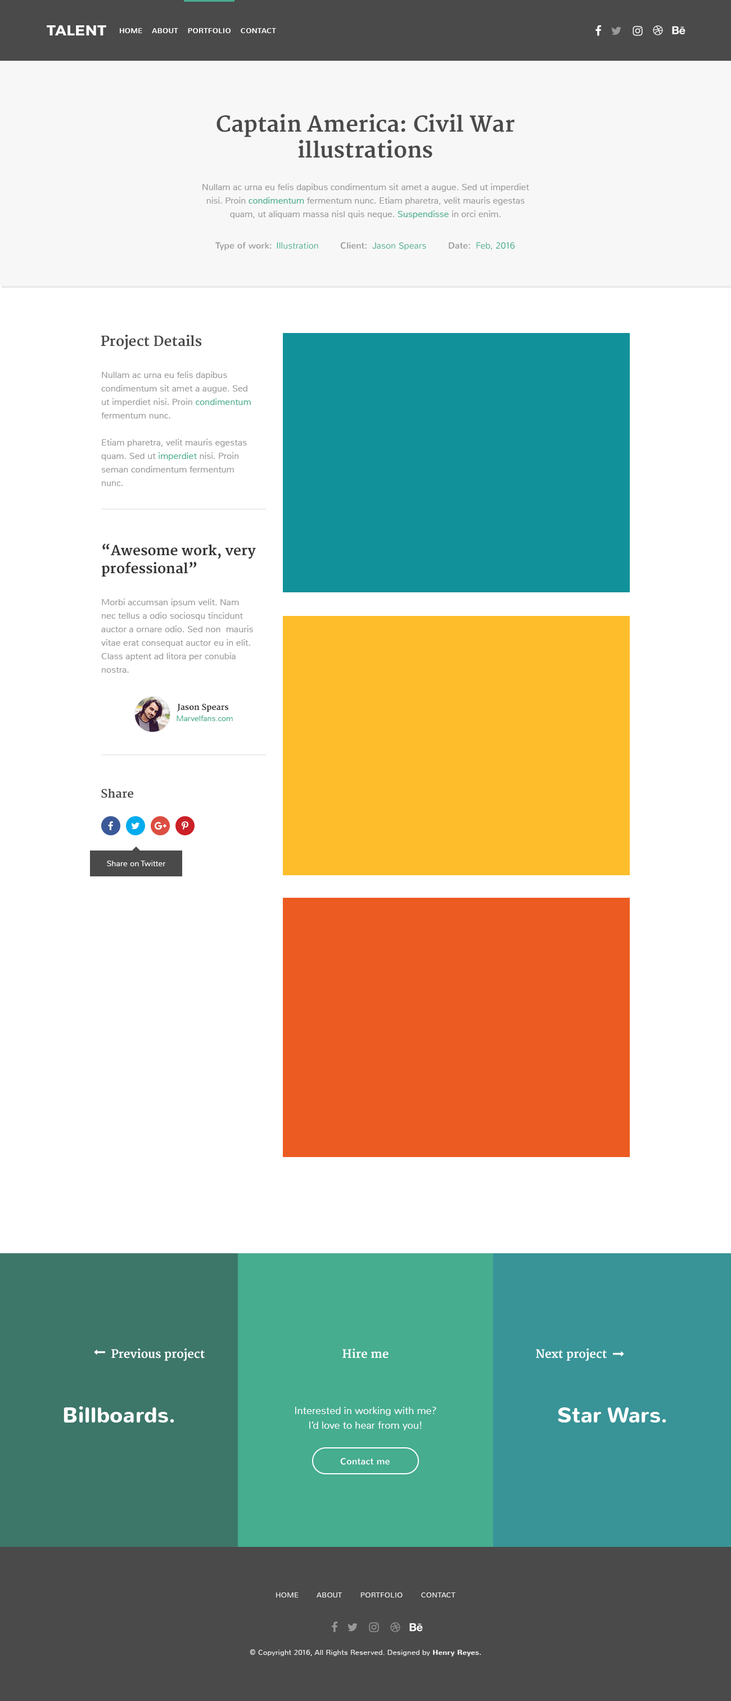
<style>
.page{position:relative;width:731px;height:1701px;background:#ffffff}
.page>*{position:absolute;margin:0}
.t1{font:14.6px "Montserrat-Bold";letter-spacing:0.025em;color:#ffffff;text-transform:uppercase}
.t2{font:7.3px "Nunito-Regular";letter-spacing:0.025em;color:#ffffff;text-transform:uppercase}
.t3{font:21.4px/25.9px "Merriweather-Bold";color:#4a4a4a}
.t4{font:9px/13.5px "Nunito-Light";color:#999999}
.t5{font:9px/13.5px "Nunito-Light";color:#46ad8f}
.t6{font:9px "Nunito-Regular";color:#999999}
.t7{font:9px "Nunito-Light";color:#46ad8f}
.t8{font:13.5px "Merriweather-Bold";color:#4a4a4a}
.t9{font:13.5px/18px "Merriweather-Bold";color:#333333}
.t10{font:7.9px "Merriweather-Bold";color:#333333}
.t11{font:7.9px "Nunito-Light";color:#46ad8f}
.t12{font:11.2px "Merriweather-Bold";color:#4a4a4a}
.t13{font:7.9px "Nunito-Light";letter-spacing:0.015em;color:#f7f7f7}
.t14{font:11.2px "Merriweather-Bold";color:#ffffff}
.t15{font:21.4px "Nunito-Bold";letter-spacing:0.015em;color:#ffffff}
.t16{font:10.1px/14.6px "Nunito-Light";color:#ffffff}
.t17{font:9px "Nunito-Regular";letter-spacing:0.015em;color:#ffffff}
.t18{font:7.3px "Nunito-Light";letter-spacing:0.025em;color:#eeeeee;text-transform:uppercase}
.t19{font:7.3px "Nunito-Light";letter-spacing:0.025em;color:#eeeeee}
.t20{font:7.3px "Nunito-Bold";letter-spacing:0.025em;color:#eeeeee}
.t21{font:7.3px "Nunito-Regular";letter-spacing:0.025em;color:#eeeeee}
</style>
<div class="page">
<p class="t1" style="left:47px;top:25px;width:59px;height:10px">Talent</p>
<p class="t2" style="left:120px;top:28px;width:156px;height:5px">Home    About    Portfolio    Contact</p>
<p class="t3" style="left:217px;top:114px;width:298px;height:44px;text-align:center">Captain America: Civil War illustrations</p>
<p class="t4" style="left:202px;top:183px;width:327px;height:36px;text-align:center">Nullam ac urna eu felis dapibus condimentum sit amet a augue. Sed ut imperdiet nisi. Proin <span class="t5">condimentum </span>fermentum nunc. Etiam pharetra, velit mauris egestas quam, ut aliquam massa nisl quis neque. <span class="t5">Suspendisse </span>in orci enim.</p>
<p class="t6" style="left:215px;top:242px;width:57px;height:9px">Type of work:</p>
<p class="t7" style="left:277px;top:242px;width:41px;height:7px">Illustration</p>
<p class="t6" style="left:340px;top:242px;width:27px;height:7px">Client:</p>
<p class="t7" style="left:372px;top:242px;width:54px;height:8px">Jason Spears</p>
<p class="t6" style="left:449px;top:242px;width:21px;height:7px">Date:</p>
<p class="t7" style="left:476px;top:242px;width:39px;height:8px">Feb, 2016</p>
<p class="t8" style="left:101px;top:335px;width:101px;height:15px">Project Details</p>
<p class="t4" style="left:101px;top:371px;width:150px;height:115px">Nullam ac urna eu felis dapibus condimentum sit amet a augue. Sed ut imperdiet nisi. Proin <span class="t5">condimentum </span>fermentum nunc. <br><br>Etiam pharetra, velit mauris egestas quam. Sed ut <span class="t5">imperdiet </span>nisi. Proin seman condimentum fermentum nunc.</p>
<p class="t9" style="left:102px;top:543px;width:154px;height:34px">“Awesome work, very professional”</p>
<p class="t4" style="left:101px;top:598px;width:152px;height:75px">Morbi accumsan ipsum velit. Nam nec tellus a odio sociosqu tincidunt auctor a ornare odio. Sed non  mauris vitae erat consequat auctor eu in elit. Class aptent ad litora per conubia nostra.</p>
<p class="t10" style="left:177px;top:704px;width:52px;height:8px">Jason Spears</p>
<p class="t11" style="left:177px;top:716px;width:56px;height:5px">Marvelfans.com</p>
<p class="t12" style="left:101px;top:789px;width:32px;height:9px">Share</p>
<p class="t13" style="left:107px;top:861px;width:59px;height:5px">Share on Twitter</p>
<p class="t14" style="left:111px;top:1348px;width:94px;height:13px">Previous project</p>
<p class="t14" style="left:343px;top:1348px;width:46px;height:10px">Hire me</p>
<p class="t14" style="left:536px;top:1348px;width:71px;height:13px">Next project</p>
<p class="t15" style="left:64px;top:1406px;width:110px;height:17px">Billboards.</p>
<p class="t16" style="left:295px;top:1407px;width:141px;height:23px;text-align:center">Interested in working with me?<br>I’d love to hear from you!</p>
<p class="t15" style="left:558px;top:1407px;width:109px;height:16px">Star Wars.</p>
<p class="t17" style="left:340px;top:1458px;width:50px;height:7px">Contact me</p>
<p class="t18" style="left:276px;top:1592px;width:180px;height:6px">Home        About        Portfolio        Contact</p>
<p class="t19" style="left:250px;top:1649px;width:232px;height:8px">© Copyright 2016, All Rights Reserved. Designed by <span class="t20">Henry Reyes</span><span class="t21">.</span></p>
</div>
